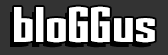
<style>
.page{position:relative;width:168px;height:55px;background:#333333}
.page>*{position:absolute;margin:0}
.t1{font:50px "Perca";letter-spacing:0.03em;color:#ffffff}
</style>
<div class="page">
<p class="t1" style="left:14px;top:6px;width:141px;height:37px">bloGGus</p>
<p class="t1" style="left:14px;top:6px;width:141px;height:37px">bloGGus</p>
</div>
